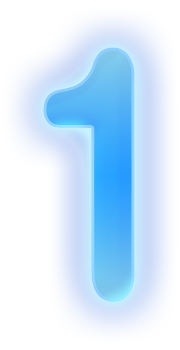
<style>
.page{position:relative;width:180px;height:350px;background:#ffffff}
.page>*{position:absolute;margin:0}
.t1{font:360px "AGBuchRoundedCondensedBQ-BoldOutline";letter-spacing:0.025em;scale:0.83 1}
</style>
<div class="page">
<p class="t1" style="left:43px;top:47px;width:92px;height:255px">1</p>
<p class="t1" style="left:43px;top:47px;width:92px;height:255px">1</p>
<p class="t1" style="left:43px;top:47px;width:92px;height:255px">1</p>
</div>
